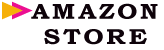
<style>
.page{position:relative;width:164px;height:50px;background:#ffffff}
.page>*{position:absolute;margin:0}
.t1{font:25.1px "BookmanOldStyle-Bold";letter-spacing:0.1em;color:#f6b009;text-transform:uppercase;scale:1.16 1}
.t2{font:25.1px "BookmanOldStyle-Bold";letter-spacing:0.1em;color:#ec0f91;text-transform:uppercase;scale:1.16 1}
.t3{font:21.8px/4.2px "BookmanOldStyle-Bold";letter-spacing:0.1em;color:#0e030a;text-transform:uppercase;scale:1.16 1}
</style>
<div class="page">
<p class="t1" style="left:2px;top:1px;width:21px;height:19px">►</p>
<p class="t2" style="left:12px;top:1px;width:21px;height:19px">►</p>
<p class="t3" style="left:31px;top:3px;width:127px;height:42px;text-align:center">amazon<br>store</p>
</div>
